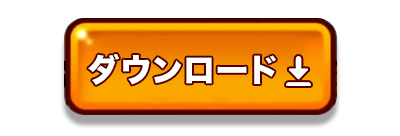
<style>
.page{position:relative;width:400px;height:136px;background:#ffffff}
.page>*{position:absolute;margin:0}
.t1{font:32.1px "HiraKakuStdN-W8";letter-spacing:0.04em;color:#ffffff}
</style>
<div class="page">
<p class="t1" style="left:88px;top:54px;width:188px;height:31px">ダウンロード</p>
</div>
